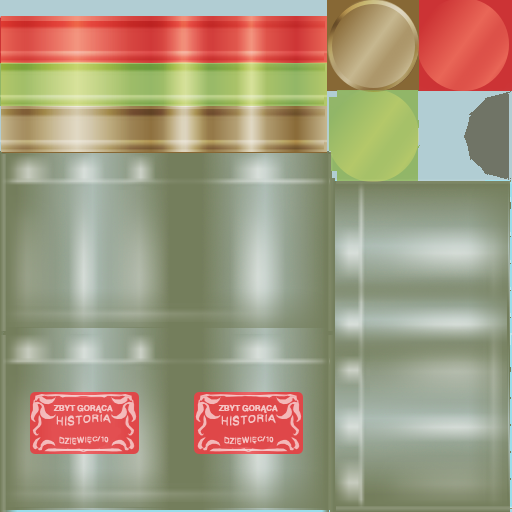
<style>
.page{position:relative;width:512px;height:512px}
.page>*{position:absolute;margin:0}
.t1{font:8px "ComicHelvetic-Medium";color:#f5c4c4}
.t2{font:11.7px "ComicHelvetic-Medium";color:#f5c4c4}
</style>
<div class="page">
<p class="t1" style="left:53px;top:404px;width:60px;height:9px">ZBYT GORĄCA</p>
<p class="t2" style="left:56px;top:414px;width:55px;height:12px">HISTORIA</p>
<p class="t1" style="left:218px;top:404px;width:60px;height:9px">ZBYT GORĄCA</p>
<p class="t2" style="left:221px;top:414px;width:55px;height:12px">HISTORIA</p>
<p class="t1" style="left:59px;top:436px;width:50px;height:9px">DZIĘWIĘC/10</p>
<p class="t1" style="left:224px;top:436px;width:50px;height:9px">DZIĘWIĘC/10</p>
</div>
